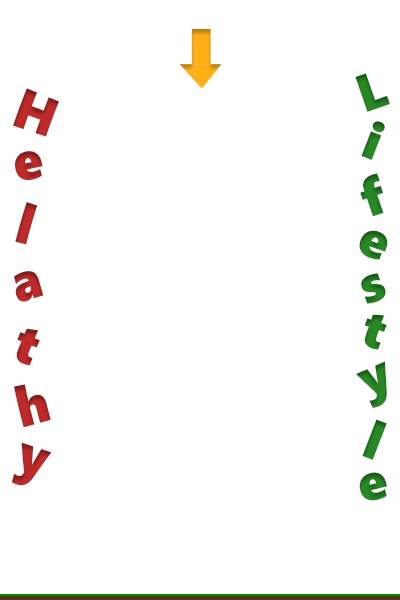
<style>
.page{position:relative;width:400px;height:600px;background:#ffffff}
.page>*{position:absolute;margin:0}
.t1{font:52.7px "SegoeUIBlack";color:#268924}
.t2{font:52.7px "SegoeUIBlack";color:#be2a2a}
</style>
<div class="page">
<p class="t1" style="left:355px;top:73px;width:35px;height:39px;rotate:-19deg">L</p>
<p class="t2" style="left:13px;top:88px;width:46px;height:49px;rotate:20deg">H</p>
<p class="t1" style="left:361px;top:121px;width:24px;height:39px;rotate:21deg">i</p>
<p class="t2" style="left:15px;top:151px;width:28px;height:30px;rotate:-12deg">e</p>
<p class="t1" style="left:360px;top:173px;width:24px;height:44px;rotate:-19deg">f</p>
<p class="t2" style="left:15px;top:202px;width:23px;height:43px;rotate:16deg">l</p>
<p class="t1" style="left:359px;top:230px;width:29px;height:30px;rotate:19deg">e</p>
<p class="t2" style="left:14px;top:271px;width:30px;height:31px;rotate:-15deg">a</p>
<p class="t1" style="left:361px;top:273px;width:25px;height:31px;rotate:-18deg">s</p>
<p class="t1" style="left:364px;top:314px;width:23px;height:36px;rotate:19deg">t</p>
<p class="t2" style="left:16px;top:328px;width:24px;height:38px;rotate:22deg">t</p>
<p class="t1" style="left:356px;top:361px;width:31px;height:47px;rotate:-23deg">y</p>
<p class="t2" style="left:14px;top:384px;width:37px;height:44px;rotate:-13deg">h</p>
<p class="t1" style="left:362px;top:419px;width:25px;height:41px;rotate:21deg">l</p>
<p class="t2" style="left:11px;top:442px;width:41px;height:44px;rotate:17deg">y</p>
<p class="t1" style="left:359px;top:472px;width:28px;height:29px;rotate:-14deg">e</p>
</div>
